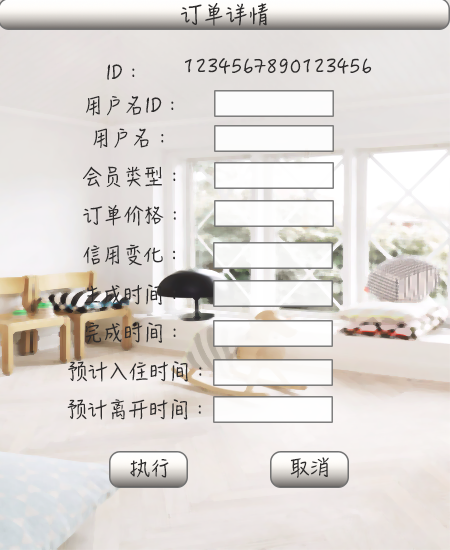
<style>
.page{position:relative;width:450px;height:550px}
.page>*{position:absolute;margin:0}
.t1{font:22px "HanziPenSC-W5";letter-spacing:-0.005em;color:#2f2d2d;text-transform:uppercase}
.t2{font:20px "HanziPenSC-W5";letter-spacing:-0.005em;color:#2f2d2d;text-transform:uppercase}
</style>
<div class="page">
<p class="t1" style="left:180px;top:3px;width:88px;height:23px">订单详情</p>
<p class="t2" style="left:107px;top:64px;width:28px;height:16px">ID：</p>
<p class="t2" style="left:185px;top:58px;width:187px;height:16px">1234567890123456</p>
<p class="t2" style="left:86px;top:96px;width:88px;height:20px">用户名ID：</p>
<p class="t2" style="left:93px;top:128px;width:71px;height:20px">用户名：</p>
<p class="t2" style="left:83px;top:166px;width:93px;height:21px">会员类型：</p>
<p class="t2" style="left:83px;top:204px;width:93px;height:22px">订单价格：</p>
<p class="t2" style="left:83px;top:244px;width:93px;height:22px">信用变化：</p>
<p class="t2" style="left:84px;top:284px;width:92px;height:21px">生成时间：</p>
<p class="t2" style="left:85px;top:322px;width:91px;height:21px">完成时间：</p>
<p class="t2" style="left:68px;top:361px;width:134px;height:21px">预计入住时间：</p>
<p class="t2" style="left:67px;top:399px;width:134px;height:21px">预计离开时间：</p>
</div>
